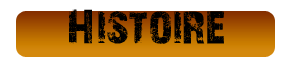
<style>
.page{position:relative;width:300px;height:70px;background:#ffffff}
.page>*{position:absolute;margin:0}
.t1{font:48px "28-Days-Later-Regular";color:#000000}
</style>
<div class="page">
<p class="t1" style="left:69px;top:9px;width:155px;height:35px">Histoire</p>
</div>
